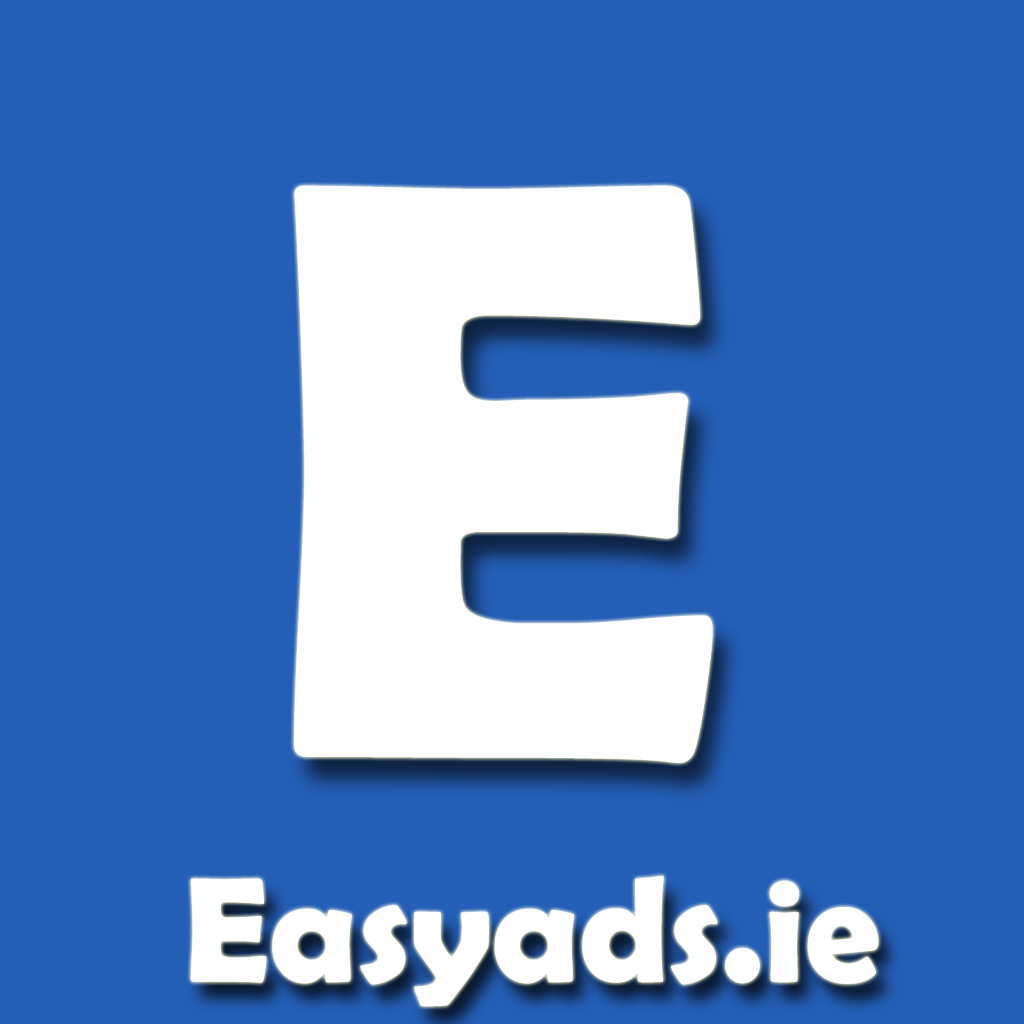
<style>
.page{position:relative;width:1024px;height:1024px;background:#245eb6}
.page>*{position:absolute;margin:0}
.t1{font:833.3px "BerlinSansFBDemi-Bold";color:#fefefe}
.t2{font:150px "BerlinSansFBDemi-Bold";color:#fefefe}
</style>
<div class="page">
<p class="t1" style="left:294px;top:185px;width:419px;height:578px">E</p>
<p class="t2" style="left:190px;top:875px;width:689px;height:132px">Easyads.ie</p>
</div>
